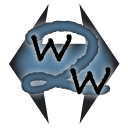
<style>
.page{position:relative;width:128px;height:128px;background:#ffffff}
.page>*{position:absolute;margin:0}
.t1{font:144px "BradleyHandITCTTBold"}
.t2{font:60px "BradleyHandITCTTBold";color:#000000}
</style>
<div class="page">
<p class="t1" style="left:21px;top:20px;width:90px;height:76px">2</p>
<p class="t2" style="left:31px;top:34px;width:41px;height:28px">w</p>
<p class="t2" style="left:70px;top:67px;width:41px;height:28px">w</p>
</div>
